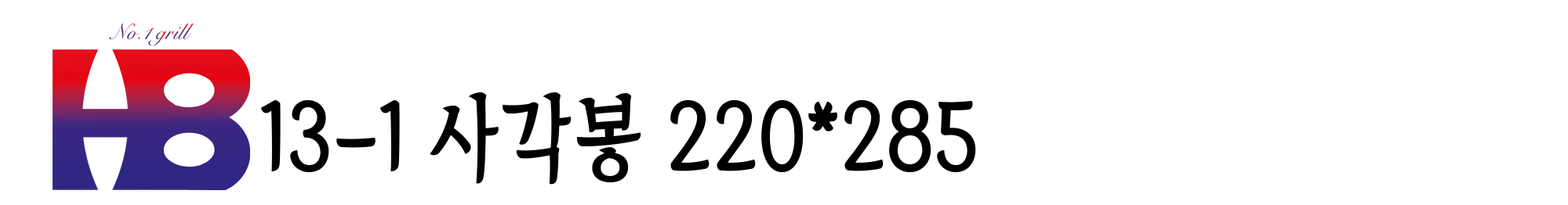
<style>
.page{position:relative;width:1568px;height:205px;background:#ffffff}
.page>*{position:absolute;margin:0}
.t1{font:93.7px "TheIndependenceHallofKorea-Regular";color:#000000;scale:0.89 1}
</style>
<div class="page">
<p class="t1" style="left:261px;top:93px;width:715px;height:92px">13-1 사각봉 220*285</p>
</div>
